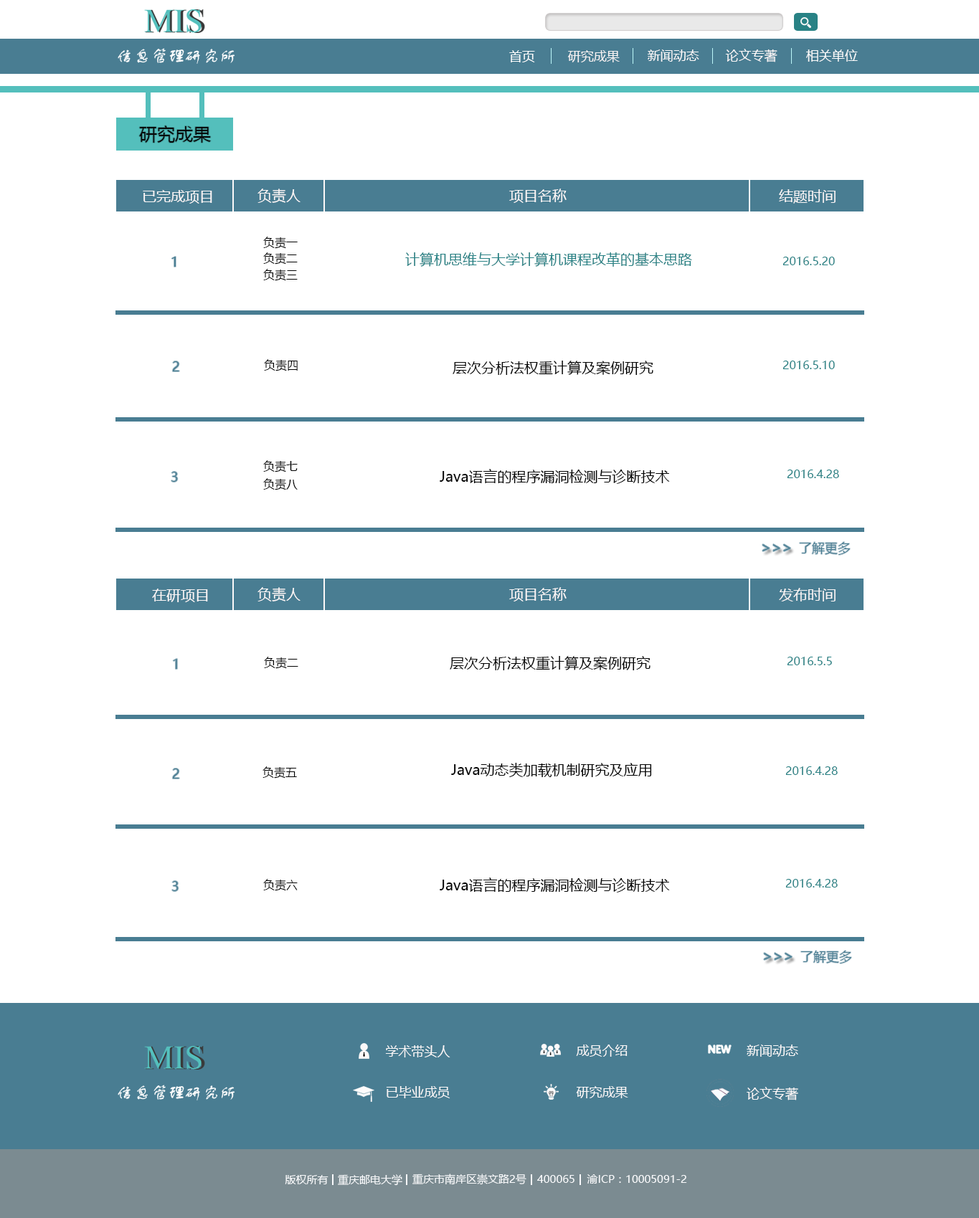
<style>
.page{position:relative;width:979px;height:1218px;background:#ffffff}
.page>*{position:absolute;margin:0}
.t1{font:12.9px "MicrosoftYaHei";color:#fefefe}
.t2{font:12.9px "MicrosoftYaHei";color:#f8f4f4}
.t3{font:12.9px "MicrosoftYaHei";color:#fefafa}
.t4{font:12.9px "MicrosoftYaHei";color:#fcf9f9}
.t5{font:12.9px "MicrosoftYaHei";color:#fdfcfc}
.t6{font:17.9px "MicrosoftYaHei";color:#060606}
.t7{font:14.3px "MicrosoftYaHei";color:#fcf7f7}
.t8{font:11.5px "MicrosoftYaHei";color:#020202}
.t9{font:14.3px "MicrosoftYaHei";color:#288285}
.t10{font:11.5px "MicrosoftYaHei";color:#288285}
.t11{font:12.9px "MicrosoftYaHei";color:#497d92}
.t12{font:14.3px "MicrosoftYaHei";color:#040404}
.t13{font:12.9px "MicrosoftYaHei";color:#fbf8f8}
.t14{font:12.9px "MicrosoftYaHei";color:#fcfafa}
.t15{font:12.9px "MicrosoftYaHei";color:#fdf8f8}
.t16{font:10.8px "MicrosoftYaHei";color:#f9fafc}
</style>
<div class="page">
<p class="t1" style="left:509px;top:50px;width:26px;height:12px">首页</p>
<p class="t2" style="left:567px;top:50px;width:53px;height:12px">研究成果</p>
<p class="t3" style="left:648px;top:49px;width:51px;height:13px">新闻动态</p>
<p class="t4" style="left:725px;top:49px;width:52px;height:13px">论文专著</p>
<p class="t5" style="left:806px;top:49px;width:52px;height:13px">相关单位</p>
<p class="t6" style="left:139px;top:125px;width:72px;height:18px">研究成果</p>
<p class="t7" style="left:143px;top:190px;width:69px;height:14px">已完成项目</p>
<p class="t7" style="left:257px;top:189px;width:43px;height:14px">负责人</p>
<p class="t7" style="left:509px;top:189px;width:57px;height:14px">项目名称</p>
<p class="t7" style="left:779px;top:189px;width:56px;height:15px">结题时间</p>
<p class="t8" style="left:263px;top:237px;width:35px;height:12px">负责一</p>
<p class="t8" style="left:263px;top:252px;width:35px;height:13px">负责二</p>
<p class="t9" style="left:405px;top:252px;width:287px;height:15px">计算机思维与大学计算机课程改革的基本思路</p>
<p class="t10" style="left:782px;top:257px;width:53px;height:8px">2016.5.20</p>
<p class="t8" style="left:263px;top:269px;width:35px;height:12px">负责三</p>
<p class="t11" style="left:172px;top:361px;width:7px;height:10px">2</p>
<p class="t8" style="left:264px;top:359px;width:34px;height:12px">负责四</p>
<p class="t12" style="left:452px;top:361px;width:201px;height:14px">层次分析法权重计算及案例研究</p>
<p class="t10" style="left:782px;top:361px;width:53px;height:8px">2016.5.10</p>
<p class="t8" style="left:263px;top:460px;width:35px;height:13px">负责七</p>
<p class="t11" style="left:171px;top:472px;width:7px;height:10px">3</p>
<p class="t12" style="left:440px;top:469px;width:230px;height:15px">Java语言的程序漏洞检测与诊断技术</p>
<p class="t10" style="left:787px;top:470px;width:52px;height:8px">2016.4.28</p>
<p class="t8" style="left:263px;top:478px;width:35px;height:12px">负责八</p>
<p class="t11" style="left:799px;top:542px;width:51px;height:13px">了解更多</p>
<p class="t7" style="left:152px;top:589px;width:56px;height:13px">在研项目</p>
<p class="t7" style="left:257px;top:587px;width:43px;height:15px">负责人</p>
<p class="t7" style="left:509px;top:587px;width:57px;height:15px">项目名称</p>
<p class="t7" style="left:779px;top:588px;width:56px;height:14px">发布时间</p>
<p class="t11" style="left:173px;top:659px;width:4px;height:10px">1</p>
<p class="t8" style="left:264px;top:657px;width:34px;height:12px">负责二</p>
<p class="t12" style="left:450px;top:656px;width:200px;height:14px">层次分析法权重计算及案例研究</p>
<p class="t10" style="left:787px;top:657px;width:45px;height:8px">2016.5.5</p>
<p class="t11" style="left:172px;top:769px;width:7px;height:10px">2</p>
<p class="t8" style="left:262px;top:767px;width:35px;height:12px">负责五</p>
<p class="t12" style="left:451px;top:763px;width:201px;height:14px">Java动态类加载机制研究及应用</p>
<p class="t10" style="left:785px;top:767px;width:53px;height:8px">2016.4.28</p>
<p class="t11" style="left:172px;top:881px;width:7px;height:10px">3</p>
<p class="t8" style="left:263px;top:879px;width:35px;height:12px">负责六</p>
<p class="t12" style="left:440px;top:878px;width:230px;height:15px">Java语言的程序漏洞检测与诊断技术</p>
<p class="t10" style="left:785px;top:879px;width:53px;height:9px">2016.4.28</p>
<p class="t11" style="left:800px;top:951px;width:51px;height:13px">了解更多</p>
<p class="t13" style="left:385px;top:1045px;width:65px;height:13px">学术带头人</p>
<p class="t13" style="left:576px;top:1045px;width:51px;height:12px">成员介绍</p>
<p class="t14" style="left:746px;top:1045px;width:52px;height:12px">新闻动态</p>
<p class="t13" style="left:386px;top:1086px;width:64px;height:13px">已毕业成员</p>
<p class="t13" style="left:576px;top:1086px;width:52px;height:13px">研究成果</p>
<p class="t15" style="left:746px;top:1087px;width:52px;height:14px">论文专著</p>
<p class="t16" style="left:285px;top:1175px;width:43px;height:10px">版权所有</p>
<p class="t16" style="left:338px;top:1175px;width:64px;height:11px">重庆邮电大学</p>
<p class="t16" style="left:412px;top:1174px;width:114px;height:11px">重庆市南岸区崇文路2号</p>
<p class="t16" style="left:537px;top:1175px;width:37px;height:8px">400065</p>
<p class="t16" style="left:587px;top:1175px;width:100px;height:9px">渝ICP：10005091-2</p>
</div>
